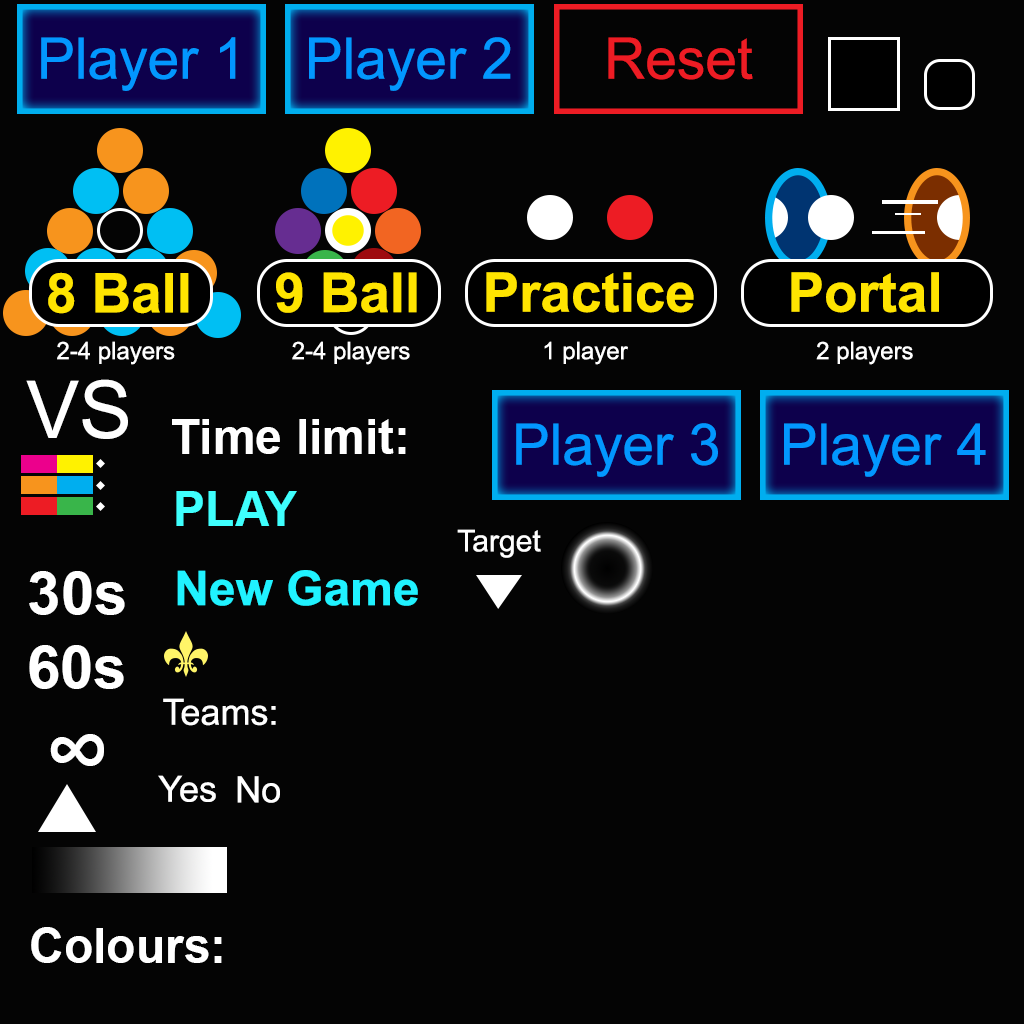
<style>
.page{position:relative;width:1024px;height:1024px;background:#040404}
.page>*{position:absolute;margin:0}
.t1{font:57.5px "ArialMT";color:#0297ff}
.t2{font:57.5px "ArialMT";color:#ed1c24}
.t3{font:54.9px "Arial-BoldMT";color:#ffe400}
.t4{font:54.8px "Arial-BoldMT";color:#ffe400}
.t5{font:24px "ArialMT";color:#ffffff}
.t6{font:79.8px "ArialMT";color:#ffffff}
.t7{font:48px "Arial-BoldMT";color:#ffffff}
.t8{font:57.4px "ArialMT";color:#0297ff}
.t9{font:48px "Arial-BoldMT";color:#3ffffd}
.t10{font:30.1px "ArialMT";color:#ffffff}
.t11{font:60px "Arial-BoldMT";color:#ffffff}
.t12{font:48px "Arial-BoldMT";color:#20f2ff}
.t13{font:36px "ArialMT";color:#ffffff}
.t14{font:94px "Arial-BoldMT";color:#ffffff}
</style>
<div class="page">
<p class="t1" style="left:41px;top:37px;width:195px;height:54px">Player 1</p>
<p class="t1" style="left:309px;top:37px;width:202px;height:54px">Player 2</p>
<p class="t2" style="left:608px;top:37px;width:145px;height:43px">Reset</p>
<p class="t3" style="left:48px;top:272px;width:141px;height:42px">8 Ball</p>
<p class="t3" style="left:276px;top:272px;width:141px;height:41px">9 Ball</p>
<p class="t4" style="left:486px;top:272px;width:208px;height:41px">Practice</p>
<p class="t4" style="left:791px;top:272px;width:148px;height:41px">Portal</p>
<p class="t5" style="left:57px;top:341px;width:118px;height:24px">2-4 players</p>
<p class="t5" style="left:292px;top:341px;width:118px;height:24px">2-4 players</p>
<p class="t5" style="left:544px;top:341px;width:84px;height:24px">1 player</p>
<p class="t5" style="left:816px;top:341px;width:97px;height:24px">2 players</p>
<p class="t6" style="left:26px;top:379px;width:102px;height:60px">VS</p>
<p class="t7" style="left:172px;top:419px;width:234px;height:35px">Time limit:</p>
<p class="t1" style="left:516px;top:423px;width:202px;height:54px">Player 3</p>
<p class="t8" style="left:784px;top:423px;width:202px;height:54px">Player 4</p>
<p class="t9" style="left:176px;top:491px;width:121px;height:35px">PLAY</p>
<p class="t10" style="left:457px;top:529px;width:84px;height:29px">Target</p>
<p class="t11" style="left:29px;top:571px;width:96px;height:44px">30s</p>
<p class="t12" style="left:177px;top:570px;width:241px;height:36px">New Game</p>
<p class="t11" style="left:29px;top:645px;width:95px;height:44px">60s</p>
<p class="t13" style="left:163px;top:698px;width:113px;height:28px">Teams:</p>
<p class="t14" style="left:50px;top:734px;width:54px;height:32px">∞</p>
<p class="t13" style="left:158px;top:775px;width:58px;height:27px">Yes</p>
<p class="t13" style="left:237px;top:776px;width:43px;height:27px">No</p>
<p class="t7" style="left:31px;top:927px;width:191px;height:36px">Colours:</p>
</div>
